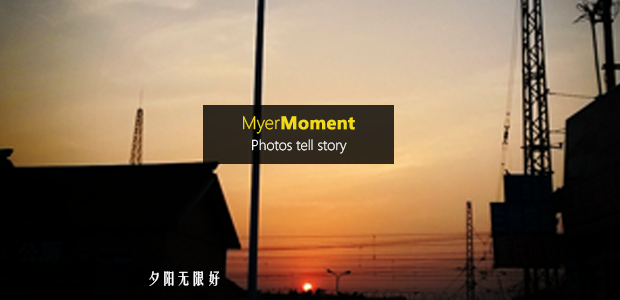
<style>
.page{position:relative;width:620px;height:300px}
.page>*{position:absolute;margin:0}
.t1{font:16.8px "MicrosoftYaHeiUI-Bold";color:#f1da19;font-weight:bold}
.t2{font:16.8px "MicrosoftYaHeiUILight";color:#f1da19}
.t3{font:14.3px "SegoeWP-Light";color:#ffffff}
.t4{font:14.9px "FZYTK--GBK1-0";color:#ffffff}
</style>
<div class="page">
<p class="t1" style="left:243px;top:116px;width:112px;height:18px"><span class="t2">Myer</span>Moment</p>
<p class="t3" style="left:252px;top:139px;width:95px;height:15px">Photos tell story</p>
<p class="t4" style="left:149px;top:271px;width:71px;height:16px">夕阳无限好</p>
</div>
